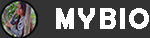
<style>
.page{position:relative;width:150px;height:38px;background:#333333}
.page>*{position:absolute;margin:0}
.t1{font:29.9px "BerlinSansFBDemi-Bold";letter-spacing:0.05em;color:#ffffff;text-transform:uppercase}
</style>
<div class="page">
<p class="t1" style="left:56px;top:8px;width:93px;height:21px">mybio</p>
</div>
